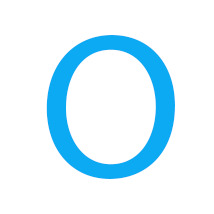
<style>
.page{position:relative;width:214px;height:214px;background:#ffffff}
.page>*{position:absolute;margin:0}
.t1{font:208.3px "MyriadPro-Regular";color:#0caaf3}
</style>
<div class="page">
<p class="t1" style="left:46px;top:35px;width:129px;height:144px">O</p>
</div>
